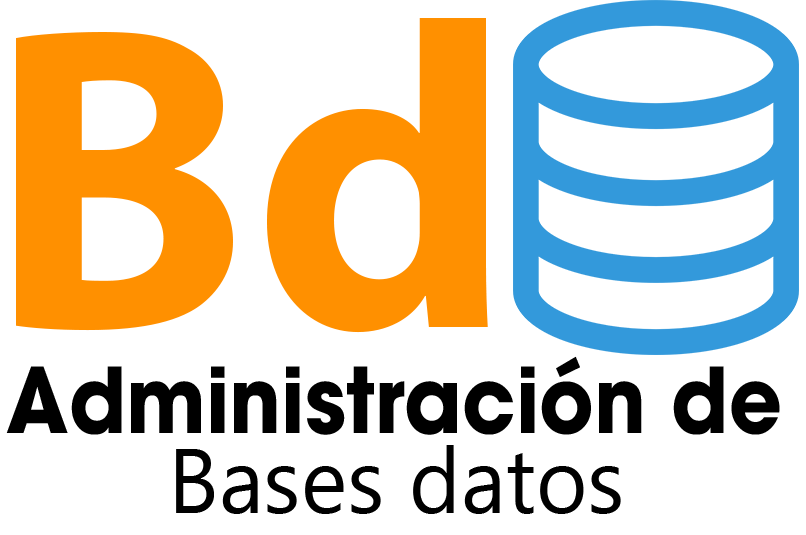
<style>
.page{position:relative;width:806px;height:535px;background:#ffffff}
.page>*{position:absolute;margin:0}
.t1{font:435px "MyriadPro-Bold";color:#ff9000}
.t2{font:90px "ITCAvantGardePro-Bold";color:#000000;scale:0.91 1}
.t3{font:91.9px "MyanmarText";color:#000000;scale:0.96 1}
</style>
<div class="page">
<p class="t1" style="left:16px;top:18px;width:472px;height:315px">Bd</p>
<p class="t2" style="left:6px;top:356px;width:774px;height:79px">Administración de</p>
<p class="t3" style="left:176px;top:445px;width:445px;height:69px">Bases datos</p>
</div>
